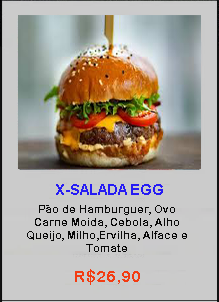
<style>
.page{position:relative;width:219px;height:302px;background:#cbcbcb}
.page>*{position:absolute;margin:0}
.t1{font:14.7px "Arial-BoldMT";color:#261cf4}
.t2{font:10.7px "ArialRoundedMTBold";color:#090909}
.t3{font:16px "ArialRoundedMTBold";color:#f33c12}
</style>
<div class="page">
<p class="t1" style="left:56px;top:184px;width:107px;height:11px">X-SALADA EGG</p>
<p class="t2" style="left:27px;top:205px;width:160px;height:47px;text-align:center">Pão de Hamburguer, Ovo<br>Carne Moida, Cebola, Alho<br>Queijo, Milho,Ervilha, Alface e Tomate</p>
<p class="t3" style="left:75px;top:269px;width:65px;height:16px">R$26,90</p>
</div>
